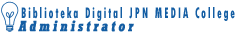
<style>
.page{position:relative;width:235px;height:36px;background:#ffffff}
.page>*{position:absolute;margin:0}
.t1{font:15.9px "TwCenMT-CondensedExtraBold";letter-spacing:0.2em;color:#135da3;scale:0.64 1}
.t2{font:14.8px "Rockwell-CondensedBold";letter-spacing:0.2em;color:#135da3;font-weight:bold;font-style:italic;scale:0.93 1}
.t3{font:14.8px "Rockwell-CondensedBold";letter-spacing:0.2em;color:#135da3;text-transform:uppercase;font-weight:bold;font-style:italic;scale:0.93 1}
</style>
<div class="page">
<p class="t1" style="left:21px;top:7px;width:214px;height:14px">Biblioteka Digital JPN MEDIA College</p>
<p class="t2" style="left:18px;top:20px;width:116px;height:12px"><span class="t3">A</span>dministrator</p>
</div>
